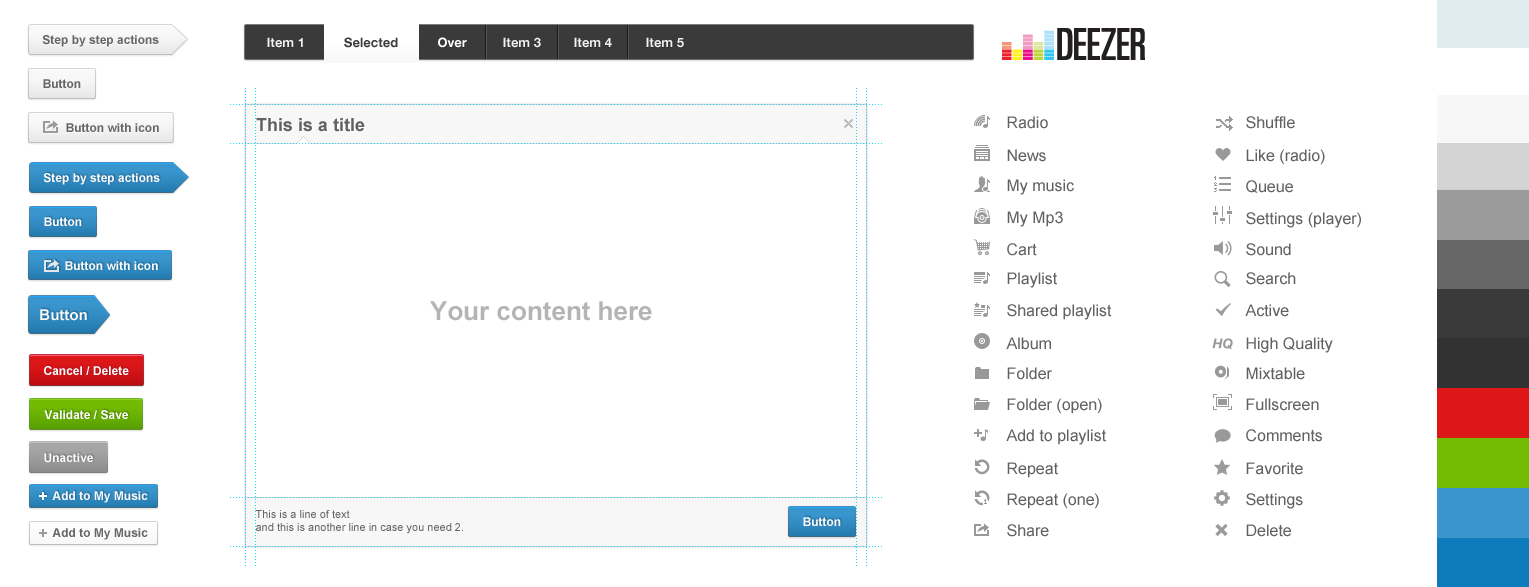
<style>
.page{position:relative;width:1529px;height:587px;background:#ffffff}
.page>*{position:absolute;margin:0}
.t1{font:12px "Arial-BoldMT";color:#666666}
.t2{font:13px "HelveticaNeue-Bold";color:#f0f0f0}
.t3{font:13px "HelveticaNeue-Bold";color:#3a3a3a}
.t4{font:13px "HelveticaNeue-Bold";color:#ffffff}
.t5{font:16px "ArialMT";color:#616161}
.t6{font:12px "Arial-BoldMT";color:#fafafa}
.t7{font:26px "Arial-BoldMT";color:#b4b4b4}
.t8{font:15px "Arial-BoldMT";color:#fafafa}
.t9{font:11px "ArialMT";color:#666666}
</style>
<div class="page">
<p class="t1" style="left:42px;top:35px;width:117px;height:12px">Step by step actions</p>
<p class="t2" style="left:267px;top:37px;width:36px;height:11px">Item 1</p>
<p class="t3" style="left:344px;top:37px;width:54px;height:11px">Selected</p>
<p class="t4" style="left:438px;top:37px;width:29px;height:11px">Over</p>
<p class="t2" style="left:503px;top:37px;width:38px;height:11px">Item 3</p>
<p class="t2" style="left:574px;top:37px;width:38px;height:11px">Item 4</p>
<p class="t2" style="left:646px;top:37px;width:38px;height:11px">Item 5</p>
<p class="t1" style="left:43px;top:79px;width:38px;height:9px">Button</p>
<p class="t1" style="left:66px;top:123px;width:93px;height:9px">Button with icon</p>
<p class="t5" style="left:1007px;top:116px;width:41px;height:13px">Radio</p>
<p class="t5" style="left:1246px;top:116px;width:49px;height:13px">Shuffle</p>
<p class="t5" style="left:1007px;top:149px;width:39px;height:13px">News</p>
<p class="t5" style="left:1246px;top:149px;width:79px;height:16px">Like (radio)</p>
<p class="t6" style="left:43px;top:173px;width:117px;height:12px">Step by step actions</p>
<p class="t5" style="left:1007px;top:179px;width:67px;height:16px">My music</p>
<p class="t5" style="left:1246px;top:180px;width:47px;height:13px">Queue</p>
<p class="t6" style="left:44px;top:217px;width:38px;height:9px">Button</p>
<p class="t5" style="left:1007px;top:211px;width:56px;height:16px">My Mp3</p>
<p class="t5" style="left:1246px;top:212px;width:115px;height:16px">Settings (player)</p>
<p class="t5" style="left:1007px;top:243px;width:30px;height:13px">Cart</p>
<p class="t5" style="left:1246px;top:243px;width:45px;height:13px">Sound</p>
<p class="t6" style="left:65px;top:261px;width:93px;height:9px">Button with icon</p>
<p class="t5" style="left:1007px;top:272px;width:50px;height:16px">Playlist</p>
<p class="t5" style="left:1246px;top:272px;width:50px;height:13px">Search</p>
<p class="t7" style="left:430px;top:301px;width:222px;height:20px">Your content here</p>
<p class="t5" style="left:1007px;top:304px;width:105px;height:16px">Shared playlist</p>
<p class="t5" style="left:1245px;top:304px;width:44px;height:13px">Active</p>
<p class="t8" style="left:40px;top:309px;width:47px;height:12px">Button</p>
<p class="t5" style="left:1006px;top:337px;width:45px;height:13px">Album</p>
<p class="t5" style="left:1246px;top:337px;width:87px;height:16px">High Quality</p>
<p class="t6" style="left:44px;top:366px;width:85px;height:9px">Cancel / Delete</p>
<p class="t5" style="left:1007px;top:367px;width:45px;height:13px">Folder</p>
<p class="t5" style="left:1246px;top:367px;width:59px;height:13px">Mixtable</p>
<p class="t5" style="left:1007px;top:398px;width:95px;height:16px">Folder (open)</p>
<p class="t5" style="left:1246px;top:398px;width:73px;height:13px">Fullscreen</p>
<p class="t6" style="left:44px;top:410px;width:84px;height:10px">Validate / Save</p>
<p class="t5" style="left:1006px;top:429px;width:100px;height:16px">Add to playlist</p>
<p class="t5" style="left:1246px;top:429px;width:76px;height:13px">Comments</p>
<p class="t6" style="left:44px;top:453px;width:49px;height:10px">Unactive</p>
<p class="t5" style="left:1007px;top:462px;width:51px;height:16px">Repeat</p>
<p class="t5" style="left:1246px;top:462px;width:57px;height:13px">Favorite</p>
<p class="t6" style="left:52px;top:491px;width:96px;height:12px">Add to My Music</p>
<p class="t5" style="left:1007px;top:493px;width:92px;height:16px">Repeat (one)</p>
<p class="t5" style="left:1246px;top:493px;width:57px;height:16px">Settings</p>
<p class="t9" style="left:255px;top:510px;width:208px;height:24px">This is a line of text<br>and this is another line in case you need 2.</p>
<p class="t6" style="left:803px;top:517px;width:38px;height:9px">Button</p>
<p class="t1" style="left:52px;top:528px;width:96px;height:12px">Add to My Music</p>
<p class="t5" style="left:1007px;top:524px;width:42px;height:13px">Share</p>
<p class="t5" style="left:1246px;top:524px;width:45px;height:13px">Delete</p>
</div>
